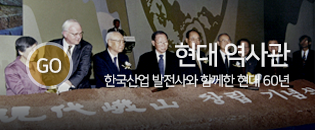
<style>
.page{position:relative;width:315px;height:130px}
.page>*{position:absolute;margin:0}
.t1{font:13.4px/21.7px "NanumSquare_acR";letter-spacing:-0.02em;color:#ffffff}
.t2{font:25.9px/21.7px "NanumSquare_acB";letter-spacing:-0.02em;color:#ffffff}
.t3{font:19.5px "NanumSquare_acB";letter-spacing:-0.02em;color:#ffffff}
</style>
<div class="page">
<p class="t1" style="left:104px;top:42px;width:187px;height:46px;text-align:right;opacity:0.88"><span class="t2">현대 역사관<br></span>한국산업 발전사와 함께한 현대 60년</p>
<p class="t3" style="left:37px;top:58px;width:25px;height:15px;opacity:0.88">GO</p>
</div>
